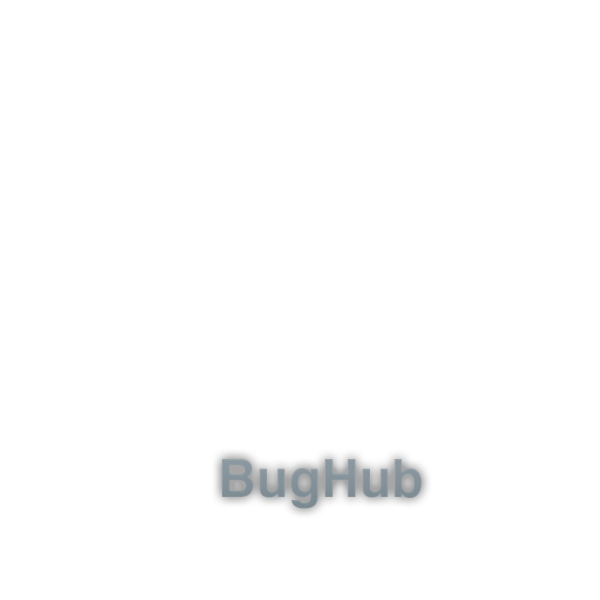
<style>
.page{position:relative;width:600px;height:600px;background:#ffffff}
.page>*{position:absolute;margin:0}
.t1{font:52.7px "Helvetica-Bold";color:#8c989f}
</style>
<div class="page">
<p class="t1" style="left:222px;top:459px;width:200px;height:50px">BugHub</p>
</div>
